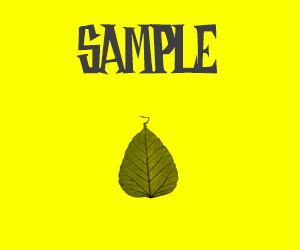
<style>
.page{position:relative;width:300px;height:250px;background:#fcff00}
.page>*{position:absolute;margin:0}
.t1{font:100px "Konstant";letter-spacing:-0.068em;color:#3f3e3e}
</style>
<div class="page">
<p class="t1" style="left:76px;top:24px;width:142px;height:51px">sample</p>
</div>
